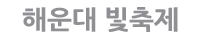
<style>
.page{position:relative;width:200px;height:40px;background:#ffffff}
.page>*{position:absolute;margin:0}
.t1{font:25.5px "NanumGothicExtraBold";letter-spacing:-0.01em;color:#909094;scale:1.05 1}
</style>
<div class="page">
<p class="t1" style="left:22px;top:7px;width:156px;height:25px">해운대 빛축제</p>
</div>
